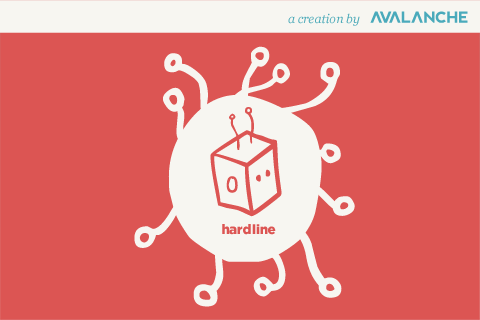
<style>
.page{position:relative;width:480px;height:320px;background:#dc5553}
.page>*{position:absolute;margin:0}
.t1{font:12.3px "Georgia-Italic";color:#4aa9b8}
.t2{font:323.5px "Tombots";color:#f7f6f1}
.t3{font:230.4px "TombatsThree";color:#f7f6f1}
.t4{font:139.7px "Tombots";color:#dc5553}
.t5{font:13.4px "Gotham-Black";color:#dc5553}
</style>
<div class="page">
<p class="t1" style="left:288px;top:13px;width:72px;height:13px">a creation by</p>
<p class="t2" style="left:134px;top:46px;width:221px;height:261px">e</p>
<p class="t3" style="left:168px;top:95px;width:154px;height:167px">w</p>
<p class="t4" style="left:210px;top:107px;width:72px;height:110px">l</p>
<p class="t5" style="left:222px;top:224px;width:54px;height:11px">hardline</p>
</div>
